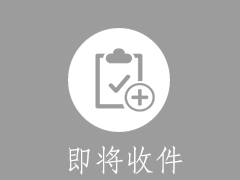
<style>
.page{position:relative;width:240px;height:180px;background:#9c9c9c}
.page>*{position:absolute;margin:0}
.t1{font:30px "STFangsong";color:#fdfdfc}
</style>
<div class="page">
<p class="t1" style="left:68px;top:145px;width:115px;height:30px">即将收件</p>
</div>
